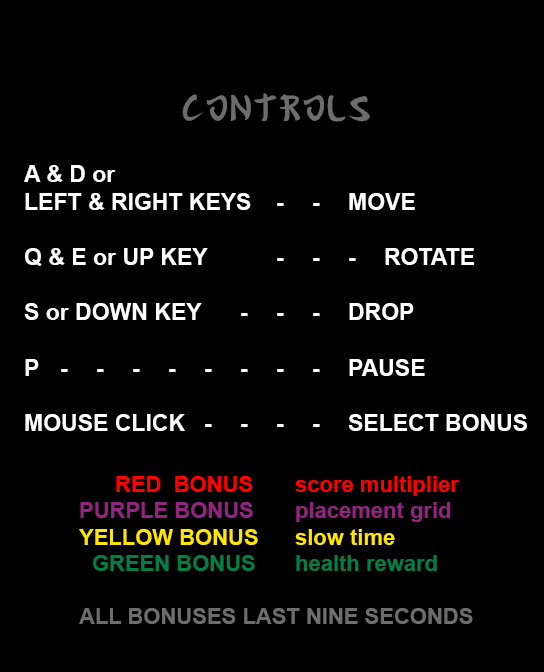
<style>
.page{position:relative;width:544px;height:672px;background:#000000}
.page>*{position:absolute;margin:0}
.t1{font:36px "Gyosho";color:#6d6d6d}
.t2{font:23px "Arial-BoldMT";color:#ffffff}
.t3{font:22px "Arial-BoldMT";color:#6d6d6d}
.t4{font:22px "Arial-BoldMT";color:#ff0000}
.t5{font:22px "Arial-BoldMT";color:#932580}
.t6{font:22px "Arial-BoldMT";color:#ffe500}
.t7{font:22px "Arial-BoldMT";color:#047f43}
</style>
<div class="page">
<p class="t1" style="left:182px;top:93px;width:188px;height:29px">CONTROLS</p>
<p class="t2" style="left:24px;top:165px;width:503px;height:266px">A &amp; D or <br>LEFT &amp; RIGHT KEYS - - MOVE<br><br>Q &amp; E or UP KEY  - - - ROTATE<br><br>S or DOWN KEY  - - - DROP<br><br>P  - - - - - - - - PAUSE<br><br>MOUSE CLICK - - - - SELECT BONUS</p>
<p class="t3" style="left:79px;top:476px;width:394px;height:148px"><span class="t4">  RED  BONUS  score multiplier<br> </span><span class="t5">PURPLE BONUS  placement grid<br> </span><span class="t6">YELLOW BONUS  slow time<br>        </span><span class="t7">GREEN BONUS  health reward</span><br><br>     ALL BONUSES LAST NINE SECONDS</p>
</div>
